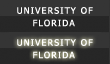
<style>
.page{position:relative;width:110px;height:64px;background:#353535}
.page>*{position:absolute;margin:0}
.t1{font:8.8px "Tahoma";letter-spacing:0.13em;color:#ffffff;font-variant:small-caps}
</style>
<div class="page">
<p class="t1" style="left:17px;top:7px;width:76px;height:7px">UNIVERSITY OF</p>
<p class="t1" style="left:33px;top:19px;width:42px;height:8px">FLORIDA</p>
</div>
